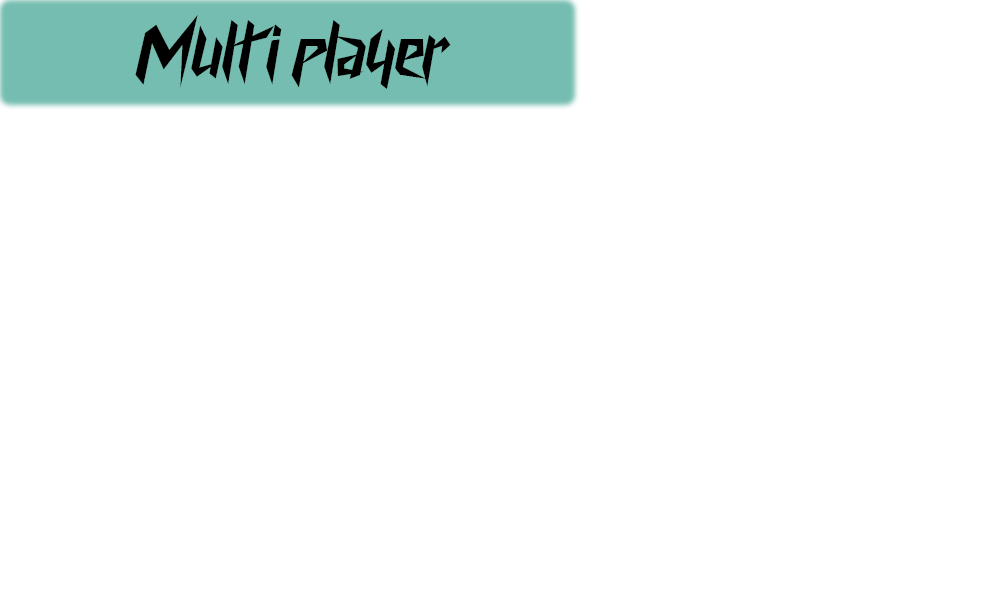
<style>
.page{position:relative;width:1001px;height:595px;background:#ffffff}
.page>*{position:absolute;margin:0}
.t1{font:72px "CyberwayRiders";color:#000000}
</style>
<div class="page">
<p class="t1" style="left:135px;top:15px;width:316px;height:74px">Multi player</p>
</div>
